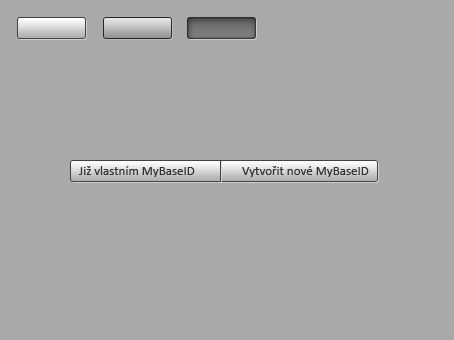
<style>
.page{position:relative;width:454px;height:340px;background:#a9a9a9}
.page>*{position:absolute;margin:0}
.t1{font:13px "Calibri";color:#323131}
</style>
<div class="page">
<p class="t1" style="left:78px;top:166px;width:117px;height:11px">Již vlastním MyBaseID</p>
<p class="t1" style="left:242px;top:166px;width:127px;height:11px">Vytvořit nové MyBaseID</p>
</div>
